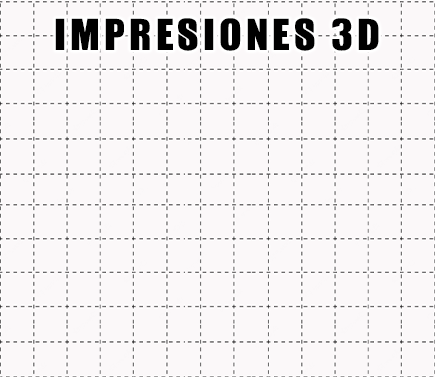
<style>
.page{position:relative;width:435px;height:377px;background:#fbf8f9}
.page>*{position:absolute;margin:0}
.t1{font:39.5px "GaboDrive-CondensedBold";letter-spacing:0.1em;color:#000000;scale:1.05 1}
</style>
<div class="page">
<p class="t1" style="left:55px;top:18px;width:324px;height:33px">IMPRESIONES 3D</p>
</div>
